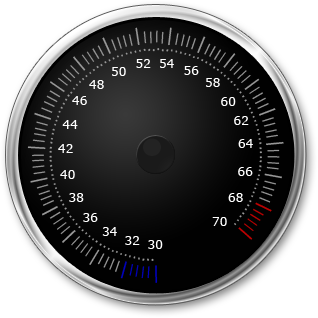
<style>
.page{position:relative;width:318px;height:318px;background:#ffffff}
.page>*{position:absolute;margin:0}
.t1{font:12px "Verdana";color:#ffffff}
</style>
<div class="page">
<p class="t1" style="left:136px;top:59px;width:15px;height:9px">52</p>
<p class="t1" style="left:160px;top:59px;width:14px;height:9px">54</p>
<p class="t1" style="left:112px;top:67px;width:14px;height:9px">50</p>
<p class="t1" style="left:184px;top:66px;width:15px;height:9px">56</p>
<p class="t1" style="left:206px;top:78px;width:14px;height:9px">58</p>
<p class="t1" style="left:89px;top:80px;width:15px;height:9px">48</p>
<p class="t1" style="left:72px;top:96px;width:15px;height:9px">46</p>
<p class="t1" style="left:221px;top:97px;width:15px;height:9px">60</p>
<p class="t1" style="left:62px;top:120px;width:16px;height:9px">44</p>
<p class="t1" style="left:234px;top:116px;width:15px;height:9px">62</p>
<p class="t1" style="left:58px;top:144px;width:15px;height:9px">42</p>
<p class="t1" style="left:238px;top:139px;width:15px;height:9px">64</p>
<p class="t1" style="left:60px;top:170px;width:15px;height:9px">40</p>
<p class="t1" style="left:238px;top:167px;width:15px;height:9px">66</p>
<p class="t1" style="left:69px;top:193px;width:15px;height:9px">38</p>
<p class="t1" style="left:228px;top:193px;width:15px;height:9px">68</p>
<p class="t1" style="left:83px;top:213px;width:15px;height:9px">36</p>
<p class="t1" style="left:212px;top:217px;width:15px;height:9px">70</p>
<p class="t1" style="left:102px;top:227px;width:15px;height:9px">34</p>
<p class="t1" style="left:125px;top:236px;width:15px;height:9px">32</p>
<p class="t1" style="left:148px;top:240px;width:15px;height:9px">30</p>
</div>
